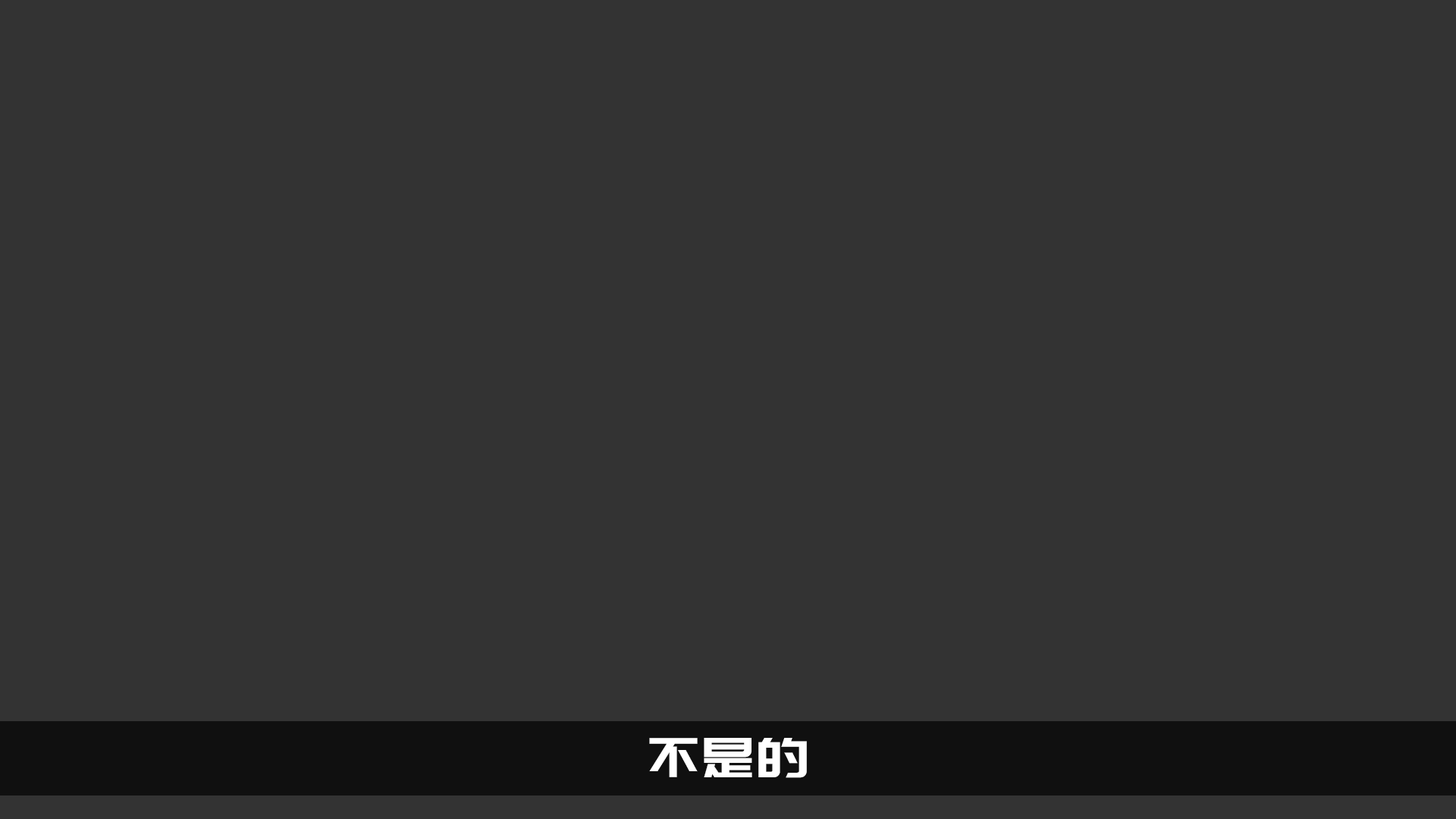
<style>
.page{position:relative;width:1456px;height:819px;background:#333333}
.page>*{position:absolute;margin:0}
.t1{font:54.6px "PangMenZhengDao-3";color:#ffffff}
</style>
<div class="page">
<p class="t1" style="left:649px;top:738px;width:158px;height:40px">不是的</p>
</div>
